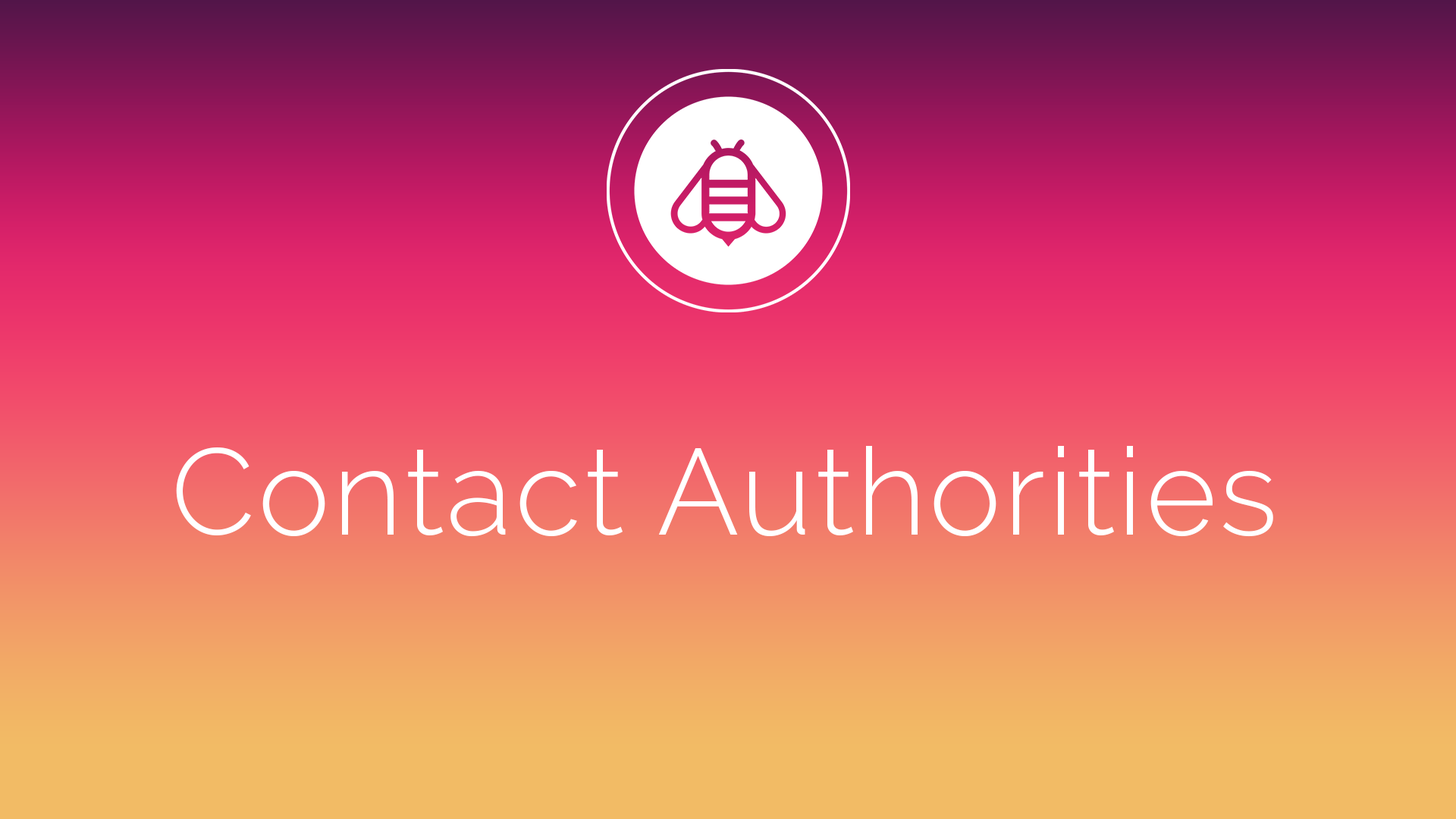
<style>
.page{position:relative;width:1456px;height:819px}
.page>*{position:absolute;margin:0}
.t1{font:121.3px "Raleway-Light";letter-spacing:0.025em;color:#ffffff}
</style>
<div class="page">
<p class="t1" style="left:176px;top:446px;width:1097px;height:91px">Contact Authorities</p>
</div>
